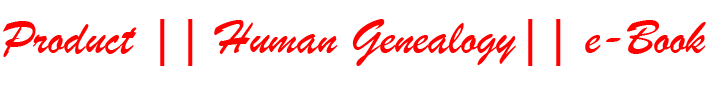
<style>
.page{position:relative;width:709px;height:85px;background:#ffffff}
.page>*{position:absolute;margin:0}
.t1{font:51px "BrushScriptMT";color:#ff0000}
</style>
<div class="page">
<p class="t1" style="left:3px;top:19px;width:703px;height:47px">Product || Human Genealogy|| e-Book</p>
</div>
